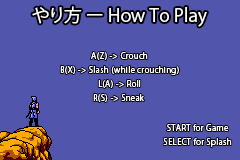
<style>
.page{position:relative;width:240px;height:160px;background:#5255ac}
.page>*{position:absolute;margin:0}
.t1{font:18px "KozGoPr6N-Regular";color:#ffffff}
.t2{font:8px/14px "KozGoPr6N-Regular";letter-spacing:0.04em;color:#ffffff}
</style>
<div class="page">
<p class="t1" style="left:32px;top:6px;width:175px;height:21px">やり方 ー How To Play</p>
<p class="t2" style="left:60px;top:52px;width:119px;height:50px;text-align:center">A(Z) -&gt; Crouch<br>B(X) -&gt; Slash (while crouching)<br>L(A) -&gt; Roll<br>R(S) -&gt; Sneak</p>
<p class="t2" style="left:163px;top:124px;width:69px;height:23px;text-align:center">START for Game<br>SELECT for Splash</p>
</div>
